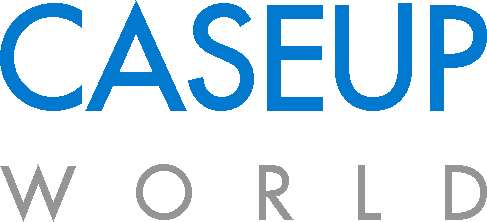
<style>
.page{position:relative;width:487px;height:222px;background:#ffffff}
.page>*{position:absolute;margin:0}
.t1{font:201.4px "PSLPrathom";color:#0079ce}
.t2{font:104.4px "PSLPrathom";letter-spacing:0.58em;color:#959595}
</style>
<div class="page">
<p class="t1" style="left:0px;top:0px;width:487px;height:111px">CASEUP</p>
<p class="t2" style="left:0px;top:164px;width:487px;height:58px">WORLD</p>
</div>
